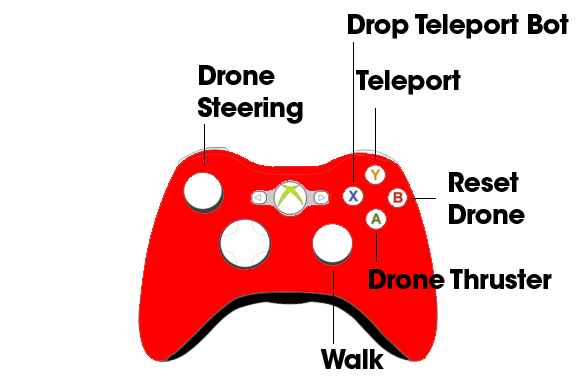
<style>
.page{position:relative;width:576px;height:384px;background:#ffffff}
.page>*{position:absolute;margin:0}
.t1{font:26.7px "ITCAvantGardeStd-Bold";letter-spacing:-0.025em;color:#000000}
</style>
<div class="page">
<p class="t1" style="left:348px;top:14px;width:221px;height:25px">Drop Teleport Bot</p>
<p class="t1" style="left:356px;top:70px;width:105px;height:25px">Teleport</p>
<p class="t1" style="left:449px;top:172px;width:76px;height:52px">Reset<br>Drone</p>
<p class="t1" style="left:369px;top:269px;width:183px;height:20px">Drone Thruster</p>
<p class="t1" style="left:320px;top:349px;width:64px;height:20px">Walk</p>
</div>
